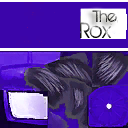
<style>
.page{position:relative;width:128px;height:128px;background:#3b05aa}
.page>*{position:absolute;margin:0}
.t1{font:18px "BIRTHOFAHERO"}
.t2{font:24px "BIRTHOFAHERO"}
</style>
<div class="page">
<p class="t1" style="left:92px;top:10px;width:26px;height:15px">The</p>
<p class="t2" style="left:80px;top:22px;width:32px;height:16px">Rox</p>
</div>
